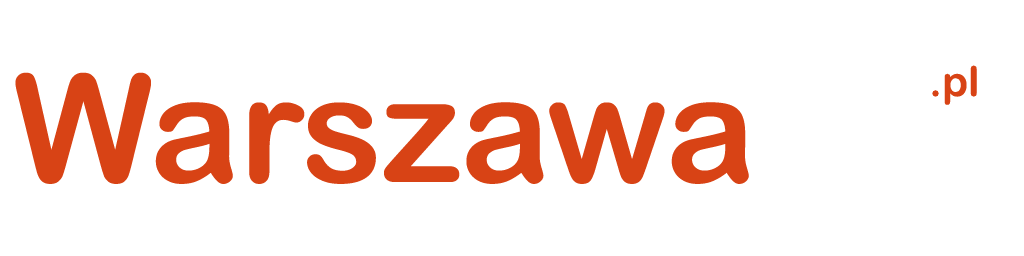
<style>
.page{position:relative;width:1024px;height:256px;background:#ffffff}
.page>*{position:absolute;margin:0}
.t1{font:41.7px "ArialRoundedMTBold";color:#d84315}
.t2{font:150px "ArialRoundedMTBold";color:#d84315}
.t3{font:150px "ArialRoundedMTBold";color:#ffffff}
</style>
<div class="page">
<p class="t1" style="left:932px;top:65px;width:45px;height:40px">.pl</p>
<p class="t2" style="left:15px;top:72px;width:912px;height:112px">Warszawa<span class="t3">23</span></p>
</div>
